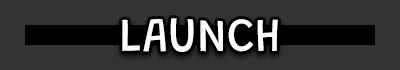
<style>
.page{position:relative;width:400px;height:70px;background:#333333}
.page>*{position:absolute;margin:0}
.t1{font:48px "Grandstander-Regular";color:#ffffff}
</style>
<div class="page">
<p class="t1" style="left:122px;top:18px;width:156px;height:34px">LAUNCH</p>
</div>
